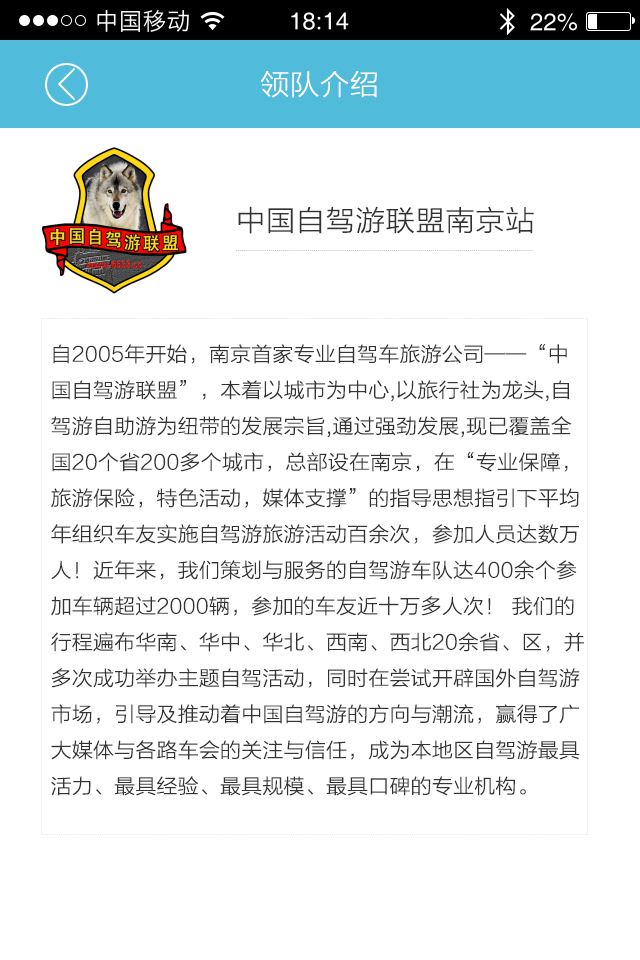
<style>
.page{position:relative;width:640px;height:960px;background:#ffffff}
.page>*{position:absolute;margin:0}
.t1{font:28px "STHeitiSC-Light";letter-spacing:-0.04em;color:#ffffff;scale:1.03 1}
.t2{font:28px "STHeitiSC-Light";letter-spacing:-0.04em;color:#333333;scale:1.03 1}
.t3{font:20px/36px "STHeitiSC-Light";letter-spacing:-0.05em;color:#333333;scale:1.03 1}
</style>
<div class="page">
<p class="t1" style="left:260px;top:71px;width:117px;height:27px">领队介绍</p>
<p class="t2" style="left:238px;top:206px;width:296px;height:28px">中国自驾游联盟南京站</p>
<p class="t3" style="left:51px;top:344px;width:533px;height:452px">自2005年开始，南京首家专业自驾车旅游公司——“中国自驾游联盟”，本着以城市为中心,以旅行社为龙头,自驾游自助游为纽带的发展宗旨,通过强劲发展,现已覆盖全国20个省200多个城市，总部设在南京，在“专业保障，旅游保险，特色活动，媒体支撑”的指导思想指引下平均年组织车友实施自驾游旅游活动百余次，参加人员达数万人！近年来，我们策划与服务的自驾游车队达400余个参加车辆超过2000辆，参加的车友近十万多人次！ 我们的行程遍布华南、华中、华北、西南、西北20余省、区，并多次成功举办主题自驾活动，同时在尝试开辟国外自驾游<br>市场，引导及推动着中国自驾游的方向与潮流，赢得了广大媒体与各路车会的关注与信任，成为本地区自驾游最具活力、最具经验、最具规模、最具口碑的专业机构。</p>
</div>
